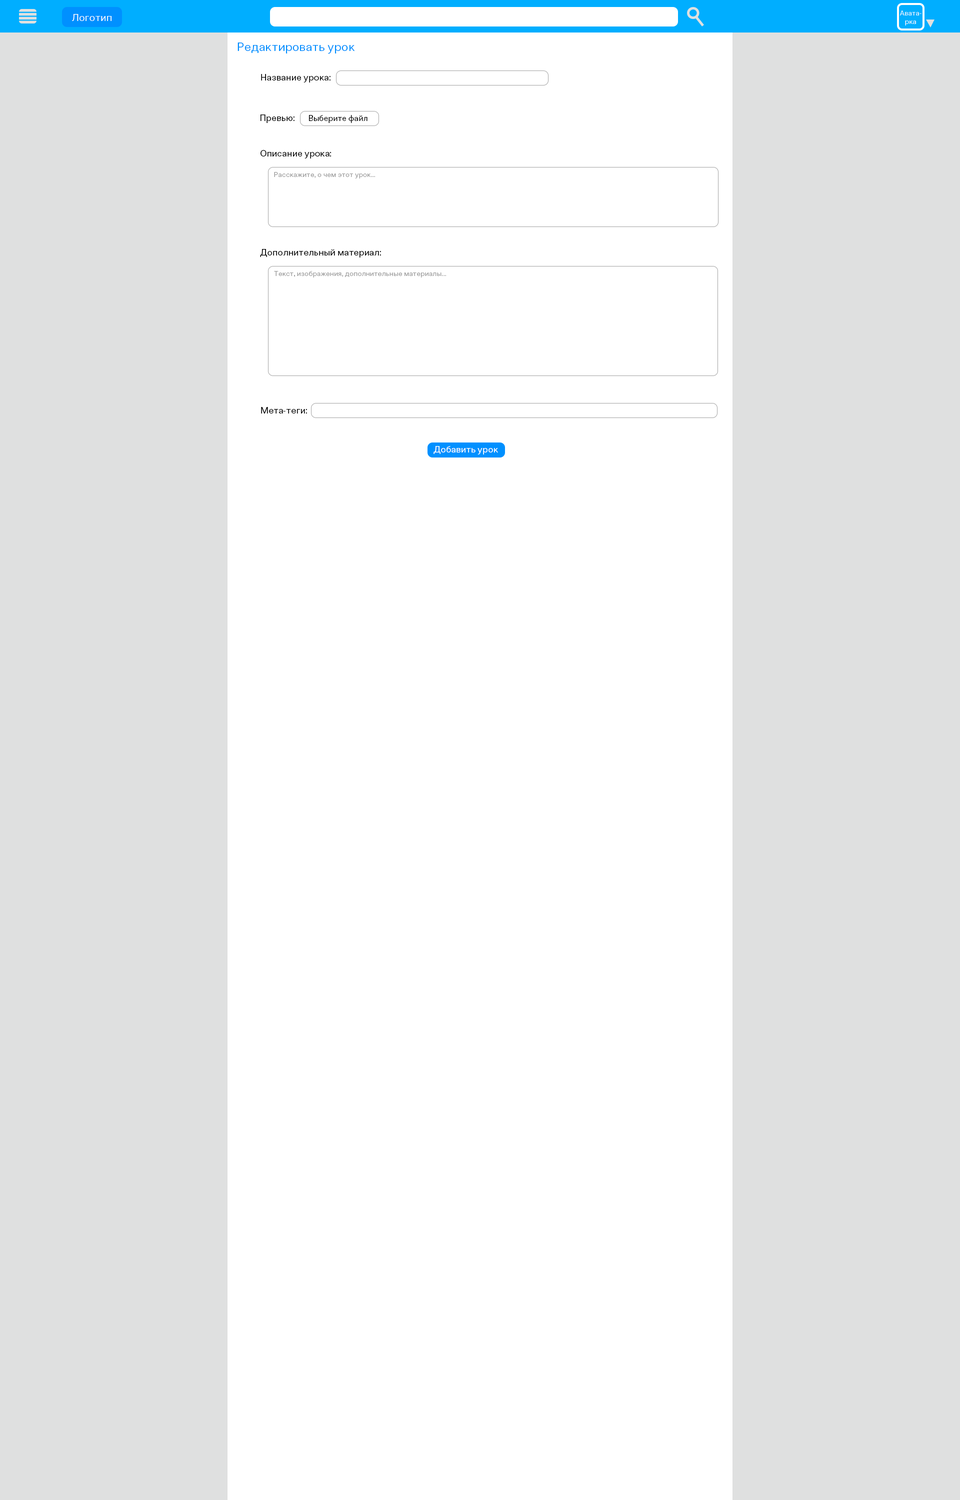
<style>
.page{position:relative;width:960px;height:1500px;background:#ffffff}
.page>*{position:absolute;margin:0}
.t1{font:10px "ClinicaPro-Regular";color:#ffffff}
.t2{font:7px "ClinicaPro-Regular";color:#ffffff}
.t3{font:12px "ClinicaPro-Regular";color:#0090ff}
.t4{font:9px "ClinicaPro-Regular";color:#000000}
.t5{font:8px "ClinicaPro-Regular";color:#000000}
.t6{font:7px "ClinicaPro-Regular";color:#9a9a9a}
.t7{font:9px "ClinicaPro-Regular";color:#ffffff}
</style>
<div class="page">
<p class="t1" style="left:72px;top:14px;width:40px;height:7px">Логотип</p>
<p class="t2" style="left:900px;top:10px;width:22px;height:16px;text-align:center">Авата-<br>рка</p>
<p class="t3" style="left:238px;top:42px;width:117px;height:12px">Редактировать урок</p>
<p class="t4" style="left:261px;top:74px;width:69px;height:8px">Название урока:</p>
<p class="t4" style="left:260px;top:114px;width:34px;height:9px">Превью:</p>
<p class="t5" style="left:309px;top:115px;width:59px;height:8px">Выберите файл</p>
<p class="t4" style="left:260px;top:150px;width:71px;height:8px">Описание урока:</p>
<p class="t6" style="left:274px;top:172px;width:101px;height:6px">Расскажите, о чем этот урок...</p>
<p class="t4" style="left:260px;top:249px;width:121px;height:9px">Дополнительный материал:</p>
<p class="t6" style="left:274px;top:271px;width:172px;height:7px">Текст, изображения, дополнительные материалы...</p>
<p class="t4" style="left:261px;top:407px;width:46px;height:7px">Мета-теги:</p>
<p class="t7" style="left:434px;top:446px;width:64px;height:8px">Добавить урок</p>
</div>
